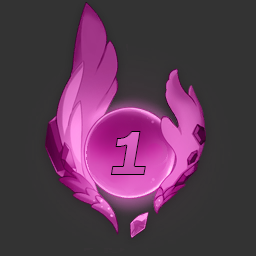
<style>
.page{position:relative;width:256px;height:256px;background:#333333}
.page>*{position:absolute;margin:0}
.t1{font:64.8px "FranklinGothic-HeavyItalic";letter-spacing:0.002em;color:#cb51b0}
</style>
<div class="page">
<p class="t1" style="left:110px;top:131px;width:36px;height:44px">1</p>
</div>
